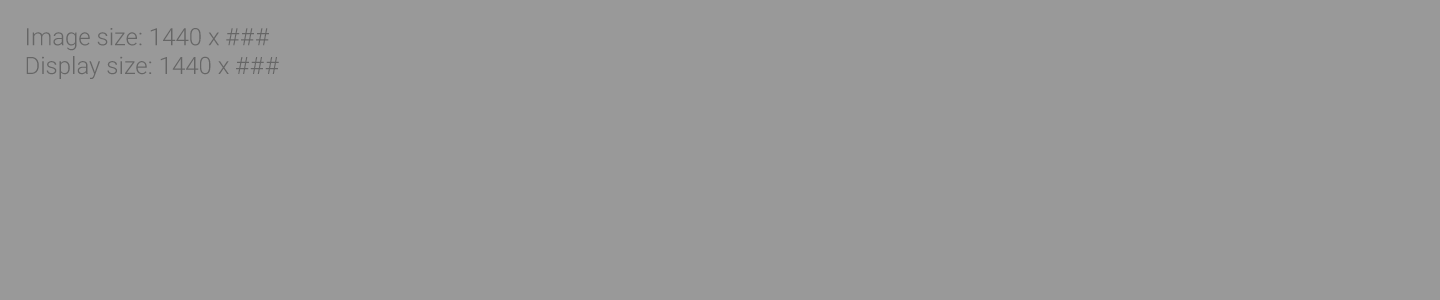
<style>
.page{position:relative;width:1440px;height:300px;background:#999999}
.page>*{position:absolute;margin:0}
.t1{font:24px "Roboto-Light";color:#666666}
</style>
<div class="page">
<p class="t1" style="left:26px;top:28px;width:253px;height:51px">Image size: 1440 x ###<br>Display size: 1440 x ###</p>
</div>
